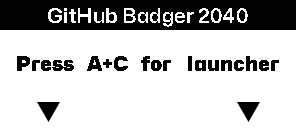
<style>
.page{position:relative;width:296px;height:128px;background:#ffffff}
.page>*{position:absolute;margin:0}
.t1{font:20.3px "MonaSans-SemiBold";color:#ffffff}
.t2{font:20.3px "HubotSans-Black";color:#010101}
</style>
<div class="page">
<p class="t1" style="left:48px;top:8px;width:200px;height:19px">GitHub Badger 2040</p>
<p class="t2" style="left:17px;top:56px;width:262px;height:15px">Press   A+C   for    launcher</p>
</div>
